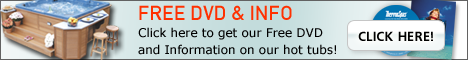
<style>
.page{position:relative;width:468px;height:60px}
.page>*{position:absolute;margin:0}
.t1{font:12px/17px "Verdana";color:#000000}
.t2{font:20px/17px "DinC";color:#ff3000}
.t3{font:13px "font180";color:#000000}
</style>
<div class="page">
<p class="t1" style="left:138px;top:5px;width:198px;height:50px"><span class="t2">FREE DVD &amp; INFO<br></span>Click here to get our Free DVD<br>and Information on our hot tubs!</p>
<p class="t3" style="left:358px;top:31px;width:75px;height:10px">CLICK HERE!</p>
</div>
